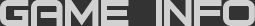
<style>
.page{position:relative;width:255px;height:26px;background:#d1d1d1}
.page>*{position:absolute;margin:0}
.t1{font:50px "Bitsumishi";color:#d1d1d1}
</style>
<div class="page">
<p class="t1" style="left:0px;top:0px;width:255px;height:26px">Game Info</p>
</div>
